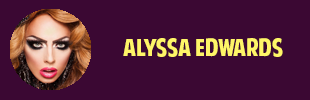
<style>
.page{position:relative;width:310px;height:100px;background:#3b0833}
.page>*{position:absolute;margin:0}
.t1{font:24px "AmericanPurpose";color:#fff568}
.t2{font:24px "Tahoma";color:#ffffff}
</style>
<div class="page">
<p class="t1" style="left:123px;top:38px;width:160px;height:19px"><span class="t2"><br></span>Alyssa Edwards</p>
</div>
